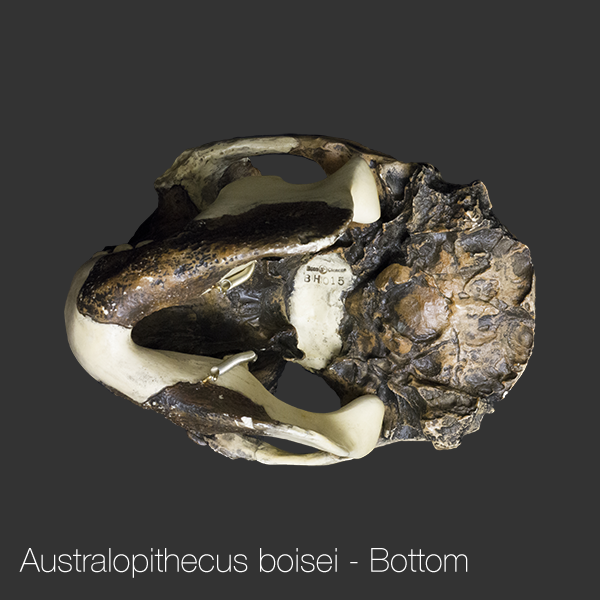
<style>
.page{position:relative;width:600px;height:600px;background:#333333}
.page>*{position:absolute;margin:0}
.t1{font:33.3px "HelveticaNeue-Thin";color:#ffffff}
</style>
<div class="page">
<p class="t1" style="left:19px;top:548px;width:449px;height:30px">Australopithecus boisei - Bottom</p>
</div>
